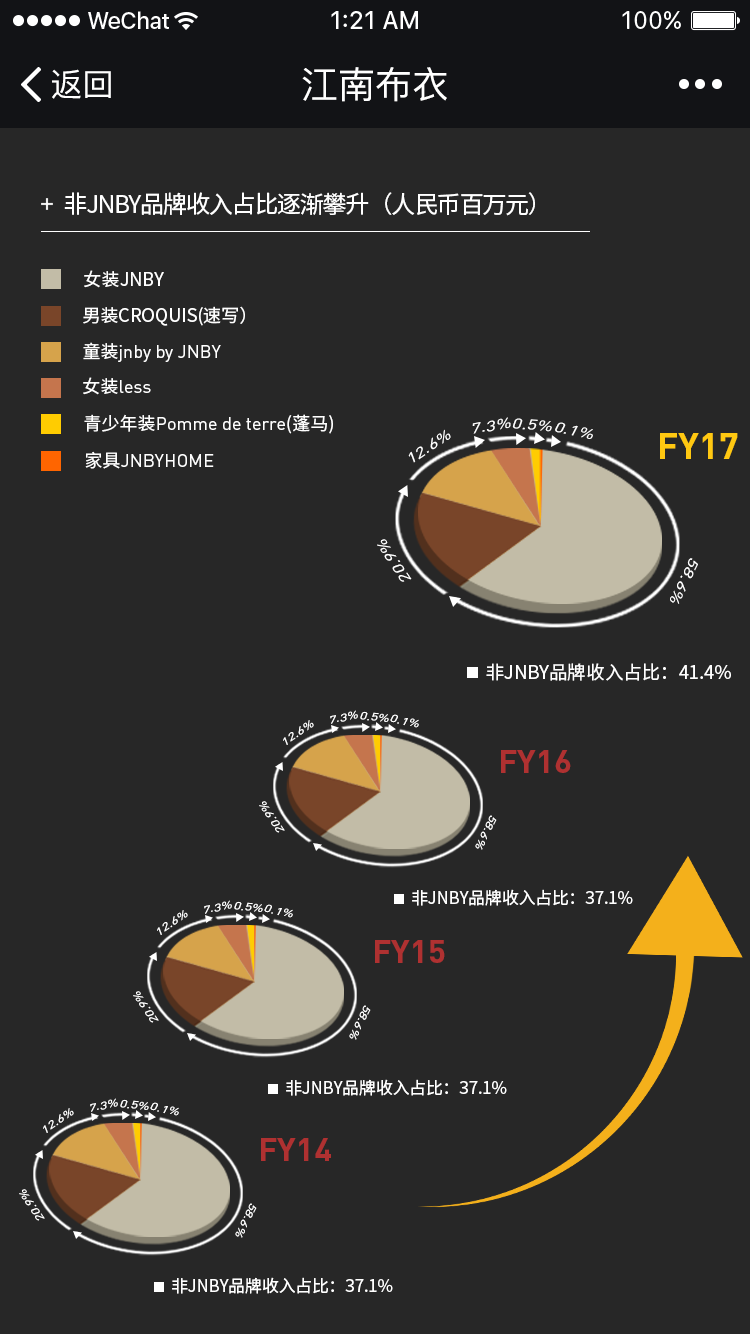
<style>
.page{position:relative;width:750px;height:1334px;background:#272727}
.page>*{position:absolute;margin:0}
.t1{font:32px "PingFang-SC-Medium";color:#ffffff}
.t2{font:37px "PingFang-SC-Medium";color:#ffffff}
.t3{font:24px "SourceHanSansCN-Regular";letter-spacing:-0.05em;color:#ffffff;text-transform:uppercase}
.t4{font:18px "SourceHanSansCN-Regular";color:#ffffff;text-transform:uppercase}
.t5{font:18px "DINPro-Regular";color:#ffffff}
.t6{font:18px "DINPro-Regular";color:#ffffff;text-transform:uppercase}
.t7{font:18px "SourceHanSansCN-Regular";color:#ffffff}
.t8{font:14.4px "DINPro-Regular";color:#ffffff;text-transform:uppercase;scale:1.3 1}
.t9{font:36.2px "DINPro-Bold";color:#ffc811;text-transform:uppercase}
.t10{font:18.5px "SourceHanSansCN-Regular";color:#ffffff;text-transform:uppercase}
.t11{font:10.6px "DINPro-Regular";color:#ffffff;text-transform:uppercase;scale:1.3 1}
.t12{font:10.7px "DINPro-Regular";color:#ffffff;text-transform:uppercase;scale:1.3 1}
.t13{font:32.6px "DINPro-Bold";color:#af3131;text-transform:uppercase}
.t14{font:16.6px "SourceHanSansCN-Regular";color:#ffffff;text-transform:uppercase}
</style>
<div class="page">
<p class="t1" style="left:52px;top:69px;width:59px;height:30px">返回</p>
<p class="t2" style="left:302px;top:67px;width:145px;height:35px">江南布衣</p>
<p class="t3" style="left:64px;top:192px;width:471px;height:24px">非JNBY品牌收入占比逐渐攀升（人民币百万元）</p>
<p class="t4" style="left:84px;top:270px;width:80px;height:18px">女装JNBY</p>
<p class="t4" style="left:83px;top:306px;width:162px;height:20px">男装CROQUIS(速写）</p>
<p class="t5" style="left:83px;top:342px;width:138px;height:20px"><span class="t4">童装</span>jnby by <span class="t6">jnby</span></p>
<p class="t5" style="left:83px;top:377px;width:68px;height:18px"><span class="t4">女装</span>less</p>
<p class="t5" style="left:84px;top:414px;width:249px;height:20px"><span class="t4">青少年装</span>Pomme de terre<span class="t7">(蓬马)</span></p>
<p class="t8" style="left:472px;top:417px;width:39px;height:17px;rotate:-11deg">7.3%</p>
<p class="t8" style="left:512px;top:418px;width:40px;height:14px;rotate:5deg">0.5%</p>
<p class="t8" style="left:555px;top:422px;width:38px;height:17px;rotate:13deg">0.1%</p>
<p class="t8" style="left:408px;top:429px;width:43px;height:34px;rotate:-35deg">12.6%</p>
<p class="t9" style="left:660px;top:433px;width:78px;height:26px">FY17</p>
<p class="t6" style="left:85px;top:451px;width:129px;height:18px"><span class="t4">家具</span>JNBYHOME</p>
<p class="t8" style="left:377px;top:539px;width:35px;height:43px;rotate:-123deg">20.9%</p>
<p class="t8" style="left:670px;top:558px;width:28px;height:46px;rotate:117deg">58.6%</p>
<p class="t10" style="left:486px;top:663px;width:245px;height:18px">非JNBY品牌收入占比：41.4%</p>
<p class="t11" style="left:330px;top:710px;width:28px;height:14px;rotate:-11deg">7.3%</p>
<p class="t12" style="left:360px;top:711px;width:29px;height:11px;rotate:5deg">0.5%</p>
<p class="t12" style="left:283px;top:720px;width:31px;height:25px;rotate:-35deg">12.6%</p>
<p class="t12" style="left:390px;top:714px;width:29px;height:14px;rotate:13deg">0.1%</p>
<p class="t13" style="left:501px;top:750px;width:70px;height:23px">FY16</p>
<p class="t12" style="left:259px;top:801px;width:26px;height:32px;rotate:-123deg">20.9%</p>
<p class="t12" style="left:475px;top:815px;width:22px;height:35px;rotate:117deg">58.6%</p>
<p class="t14" style="left:412px;top:889px;width:221px;height:17px">非JNBY品牌收入占比：37.1%</p>
<p class="t11" style="left:204px;top:900px;width:28px;height:14px;rotate:-11deg">7.3%</p>
<p class="t12" style="left:234px;top:901px;width:29px;height:11px;rotate:5deg">0.5%</p>
<p class="t12" style="left:264px;top:904px;width:29px;height:14px;rotate:13deg">0.1%</p>
<p class="t12" style="left:157px;top:910px;width:31px;height:25px;rotate:-35deg">12.6%</p>
<p class="t13" style="left:375px;top:940px;width:70px;height:23px">FY15</p>
<p class="t12" style="left:133px;top:991px;width:26px;height:32px;rotate:-123deg">20.9%</p>
<p class="t12" style="left:349px;top:1005px;width:22px;height:35px;rotate:117deg">58.6%</p>
<p class="t14" style="left:286px;top:1079px;width:221px;height:17px">非JNBY品牌收入占比：37.1%</p>
<p class="t12" style="left:43px;top:1108px;width:31px;height:25px;rotate:-35deg">12.6%</p>
<p class="t11" style="left:90px;top:1098px;width:28px;height:14px;rotate:-11deg">7.3%</p>
<p class="t12" style="left:120px;top:1099px;width:29px;height:11px;rotate:5deg">0.5%</p>
<p class="t12" style="left:150px;top:1102px;width:29px;height:14px;rotate:13deg">0.1%</p>
<p class="t13" style="left:261px;top:1138px;width:70px;height:23px">FY14</p>
<p class="t12" style="left:19px;top:1189px;width:26px;height:32px;rotate:-123deg">20.9%</p>
<p class="t12" style="left:235px;top:1203px;width:22px;height:35px;rotate:117deg">58.6%</p>
<p class="t14" style="left:172px;top:1277px;width:221px;height:17px">非JNBY品牌收入占比：37.1%</p>
</div>
